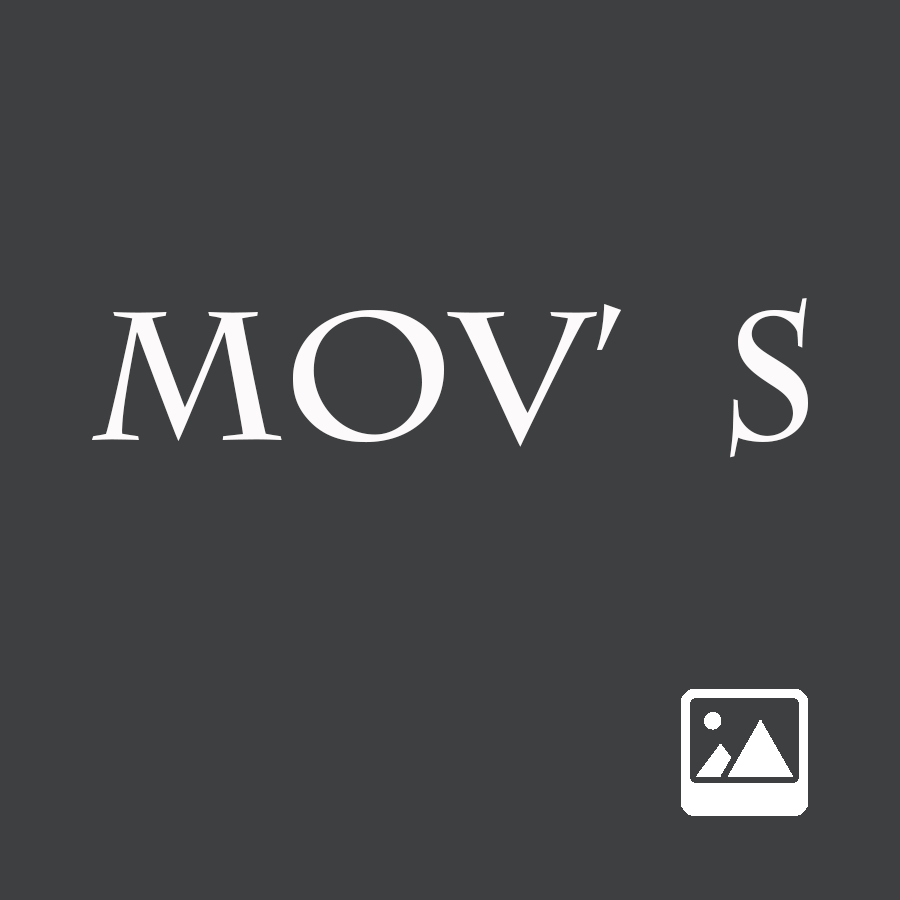
<style>
.page{position:relative;width:900px;height:900px;background:#3d3f41}
.page>*{position:absolute;margin:0}
.t1{font:180px "CharlemagneStd-Bold";color:#fcfafa}
</style>
<div class="page">
<p class="t1" style="left:92px;top:298px;width:716px;height:160px">Mov’S</p>
</div>
